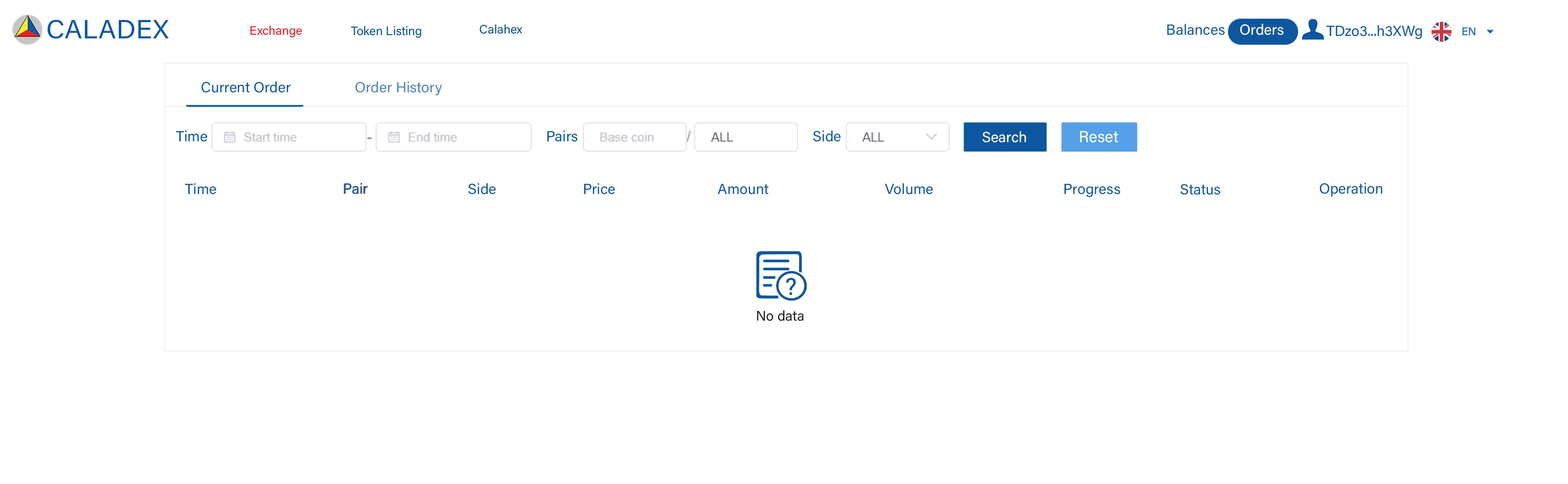
<style>
.page{position:relative;width:1568px;height:484px;background:#ffffff}
.page>*{position:absolute;margin:0}
.t1{font:26.4px "AcuminConcept-Regular";color:#0d57a0;font-style:italic}
.t2{font:12.2px "AcuminConcept-Regular";color:#eb1d24;font-style:italic}
.t3{font:12.2px "AcuminConcept-Regular";color:#0d57a0;font-style:italic}
.t4{font:14.7px "AcuminConcept-Regular";color:#0d57a0;font-style:italic}
.t5{font:11px "AcuminConcept-Regular";color:#055aaa;font-style:italic}
.t6{font:14.7px "AcuminConcept-Regular";color:#4f86bc;font-style:italic}
.t7{font:14.7px "AcuminConcept-Regular";color:#ffffff;font-style:italic}
.t8{font:15.9px "AcuminConcept-Regular";color:#ffffff;font-style:italic}
.t9{font:13.9px "AcuminConcept-Regular";color:#191b1b;font-style:italic}
</style>
<div class="page">
<p class="t1" style="left:47px;top:20px;width:122px;height:19px">CALADEX</p>
<p class="t2" style="left:250px;top:25px;width:52px;height:13px">Exchange</p>
<p class="t3" style="left:351px;top:26px;width:70px;height:12px">Token Listing</p>
<p class="t3" style="left:480px;top:24px;width:42px;height:10px">Calahex</p>
<p class="t4" style="left:1326px;top:25px;width:96px;height:14px">TDzo3...h3XWg</p>
<p class="t5" style="left:1462px;top:27px;width:13px;height:9px">EN</p>
<p class="t4" style="left:202px;top:81px;width:89px;height:12px">Current Order</p>
<p class="t6" style="left:355px;top:81px;width:87px;height:15px">Order History</p>
<p class="t4" style="left:176px;top:130px;width:31px;height:12px">Time</p>
<p class="t4" style="left:547px;top:130px;width:30px;height:12px">Pairs</p>
<p class="t4" style="left:813px;top:130px;width:28px;height:12px">Side</p>
<p class="t7" style="left:982px;top:131px;width:44px;height:11px">Search</p>
<p class="t8" style="left:1080px;top:131px;width:38px;height:11px">Reset</p>
<p class="t4" style="left:185px;top:183px;width:31px;height:11px">Time</p>
<p class="t4" style="left:344px;top:182px;width:24px;height:12px">Pair</p>
<p class="t4" style="left:468px;top:183px;width:28px;height:11px">Side</p>
<p class="t4" style="left:584px;top:183px;width:31px;height:11px">Price</p>
<p class="t4" style="left:717px;top:184px;width:51px;height:10px">Amount</p>
<p class="t4" style="left:885px;top:183px;width:48px;height:11px">Volume</p>
<p class="t4" style="left:1064px;top:184px;width:56px;height:13px">Progress</p>
<p class="t4" style="left:1180px;top:184px;width:40px;height:11px">Status</p>
<p class="t4" style="left:1320px;top:182px;width:62px;height:15px">Operation</p>
<p class="t9" style="left:757px;top:310px;width:47px;height:11px">No data</p>
</div>
